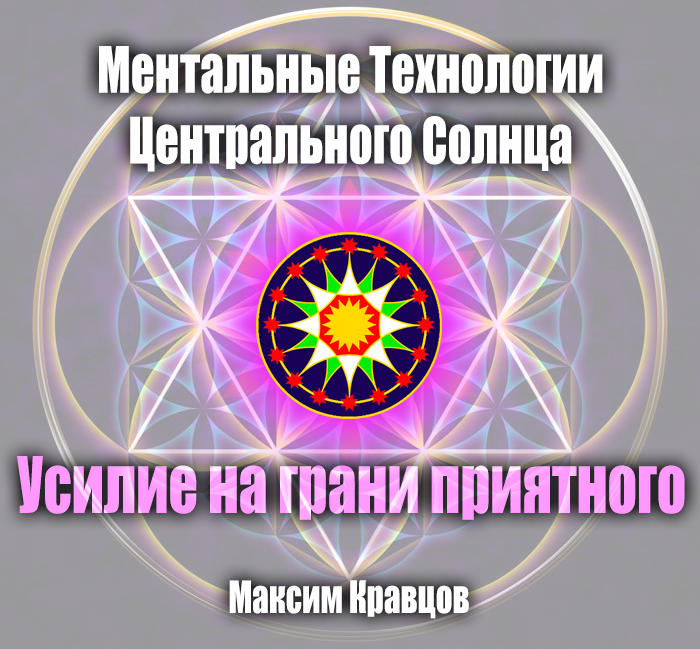
<style>
.page{position:relative;width:700px;height:649px}
.page>*{position:absolute;margin:0}
.t1{font:58.9px "Impact";color:#fefefe;scale:0.8 1}
.t2{font:72px "Impact";color:#ff9bff;scale:0.8 1}
.t3{font:41.2px "Impact";color:#fefefe;scale:0.8 1}
</style>
<div class="page">
<p class="t1" style="left:99px;top:46px;width:504px;height:126px;text-align:center">Ментальные Технологии<br>Центрального Солнца</p>
<p class="t2" style="left:17px;top:456px;width:668px;height:64px">Усилие на грани приятного</p>
<p class="t3" style="left:229px;top:580px;width:240px;height:39px">Максим Кравцов</p>
</div>
